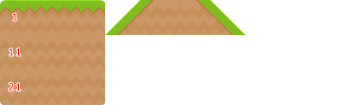
<style>
.page{position:relative;width:350px;height:105px;background:#ffffff}
.page>*{position:absolute;margin:0}
.t1{font:10px/35px "Verdana";letter-spacing:0.1em;color:#ff0000}
</style>
<div class="page">
<p class="t1" style="left:8px;top:13px;width:13px;height:78px;text-align:center">1<br>11<br>21<br>31<br>41<br>51</p>
</div>
